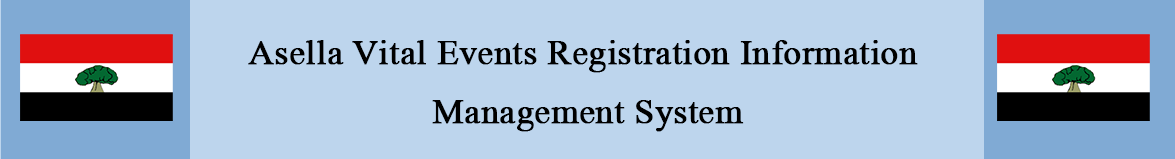
<style>
.page{position:relative;width:1175px;height:159px;background:#bdd5ed}
.page>*{position:absolute;margin:0}
.t1{font:35px/59.2px "MongolianBaiti";color:#000000;font-weight:bold}
</style>
<div class="page">
<p class="t1" style="left:248px;top:40px;width:670px;height:92px;text-align:center">Asella Vital Events Registration Information <br>Management System</p>
</div>
